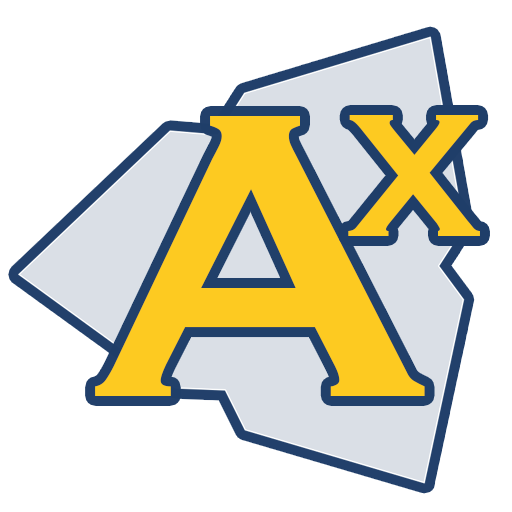
<style>
.page{position:relative;width:512px;height:512px;background:#ffffff}
.page>*{position:absolute;margin:0}
.t1{font:532px "Copperplate";color:#fdca21}
.t2{font:274px "Copperplate";color:#fdca21}
</style>
<div class="page">
<p class="t1" style="left:95px;top:116px;width:330px;height:280px">A</p>
<p class="t2" style="left:348px;top:115px;width:132px;height:121px">x</p>
</div>
